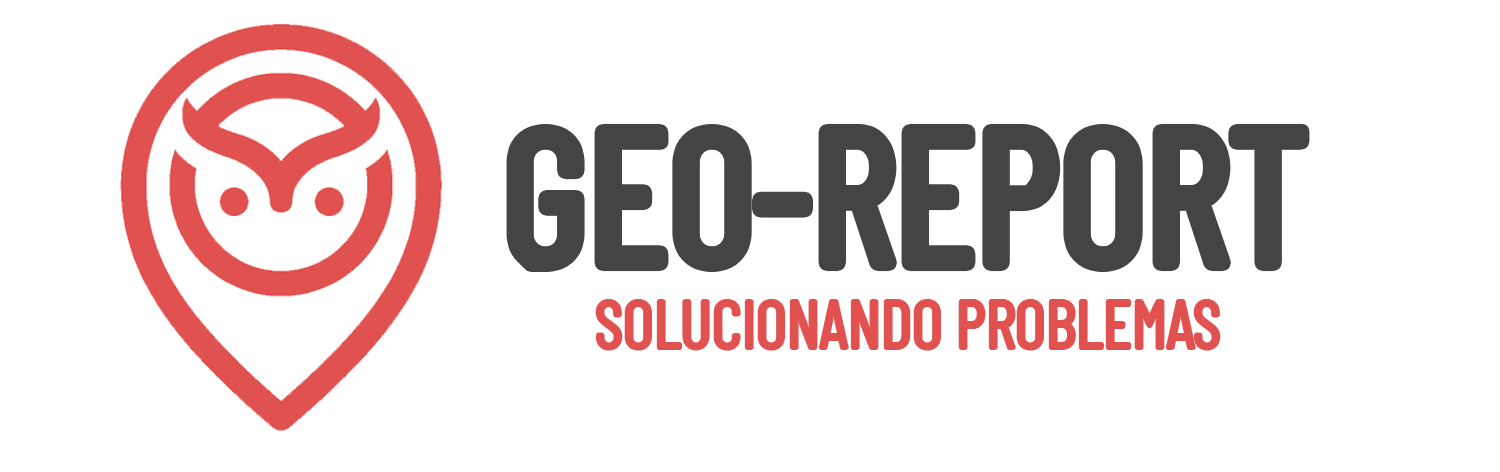
<style>
.page{position:relative;width:1500px;height:472px;background:#ffffff}
.page>*{position:absolute;margin:0}
.t1{font:188.9px "BarlowCondensed-Regular";color:#444444}
.t2{font:67px "BarlowCondensed-Regular";color:#e0514f}
</style>
<div class="page">
<p class="t1" style="left:513px;top:130px;width:790px;height:135px">GEO-REPORT</p>
<p class="t2" style="left:597px;top:301px;width:622px;height:48px">SOLUCIONANDO PROBLEMAS</p>
</div>
